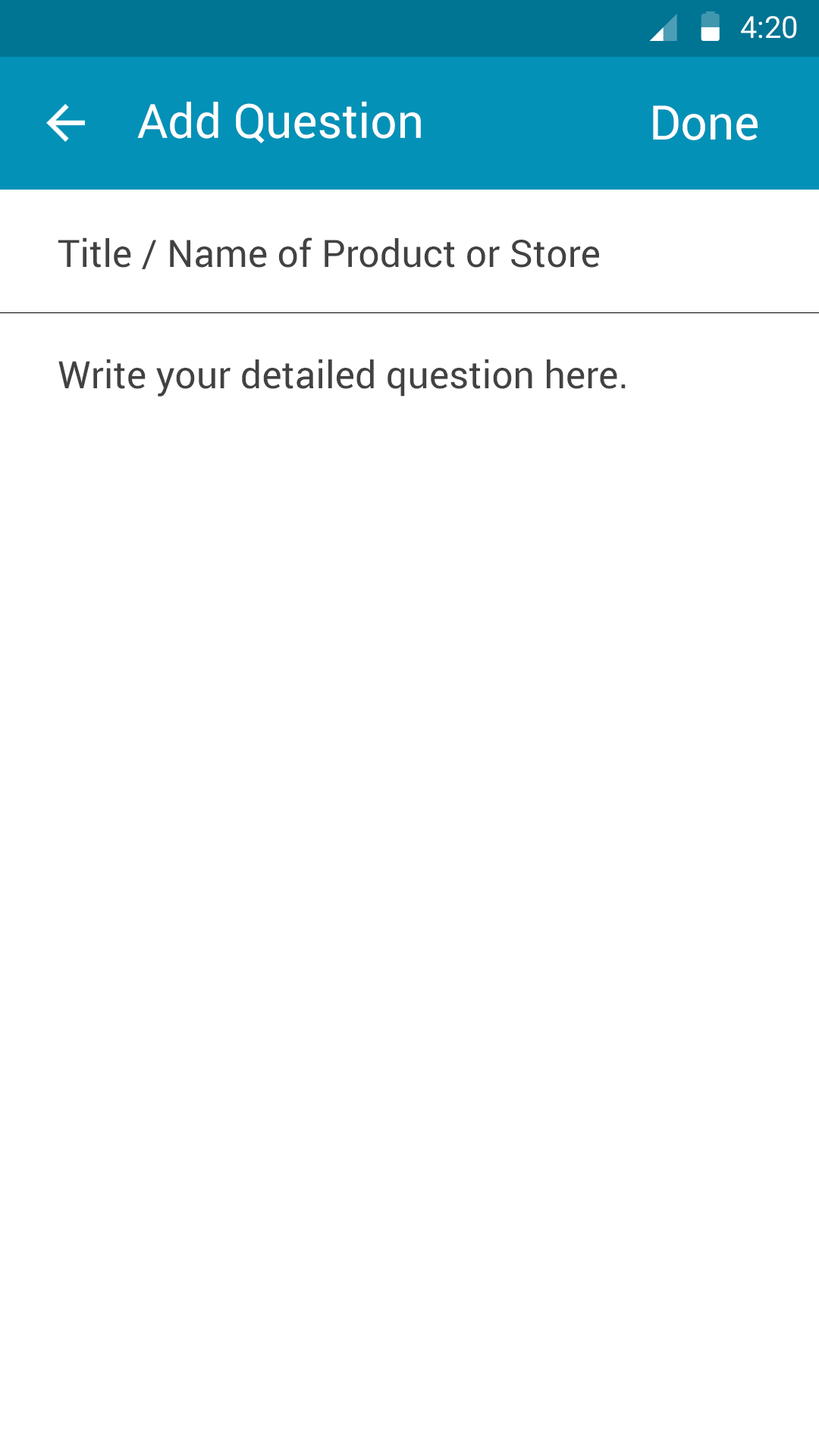
<style>
.page{position:relative;width:819px;height:1456px;background:#ffffff}
.page>*{position:absolute;margin:0}
.t1{font:30.3px "Roboto-Regular";color:#ffffff}
.t2{font:47.2px "Roboto-Regular";color:#ffffff}
.t3{font:47.4px "Roboto-Regular";color:#ffffff}
.t4{font:37.9px "Roboto-Regular";color:#424242}
</style>
<div class="page">
<p class="t1" style="left:741px;top:16px;width:56px;height:23px">4:20</p>
<p class="t2" style="left:137px;top:102px;width:284px;height:41px">Add Question</p>
<p class="t3" style="left:653px;top:105px;width:105px;height:35px">Done</p>
<p class="t4" style="left:58px;top:237px;width:541px;height:32px">Title / Name of Product or Store</p>
<p class="t4" style="left:58px;top:359px;width:568px;height:38px">Write your detailed question here.</p>
</div>
